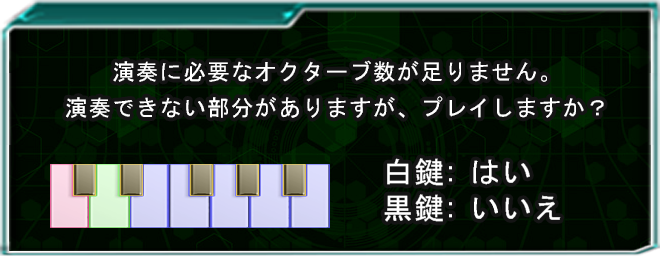
<style>
.page{position:relative;width:660px;height:256px}
.page>*{position:absolute;margin:0}
.t1{font:24px/18px "System";letter-spacing:0.05em;color:#ffffff}
.t2{font:32px/18px "System";letter-spacing:0.05em;color:#ffffff}
</style>
<div class="page">
<p class="t1" style="left:66px;top:60px;width:538px;height:58px;text-align:center">演奏に必要なオクターブ数が足りません。<br><br>演奏できない部分がありますが、プレイしますか？</p>
<p class="t2" style="left:384px;top:158px;width:177px;height:64px">白鍵: はい<br><br>黒鍵: いいえ</p>
</div>
